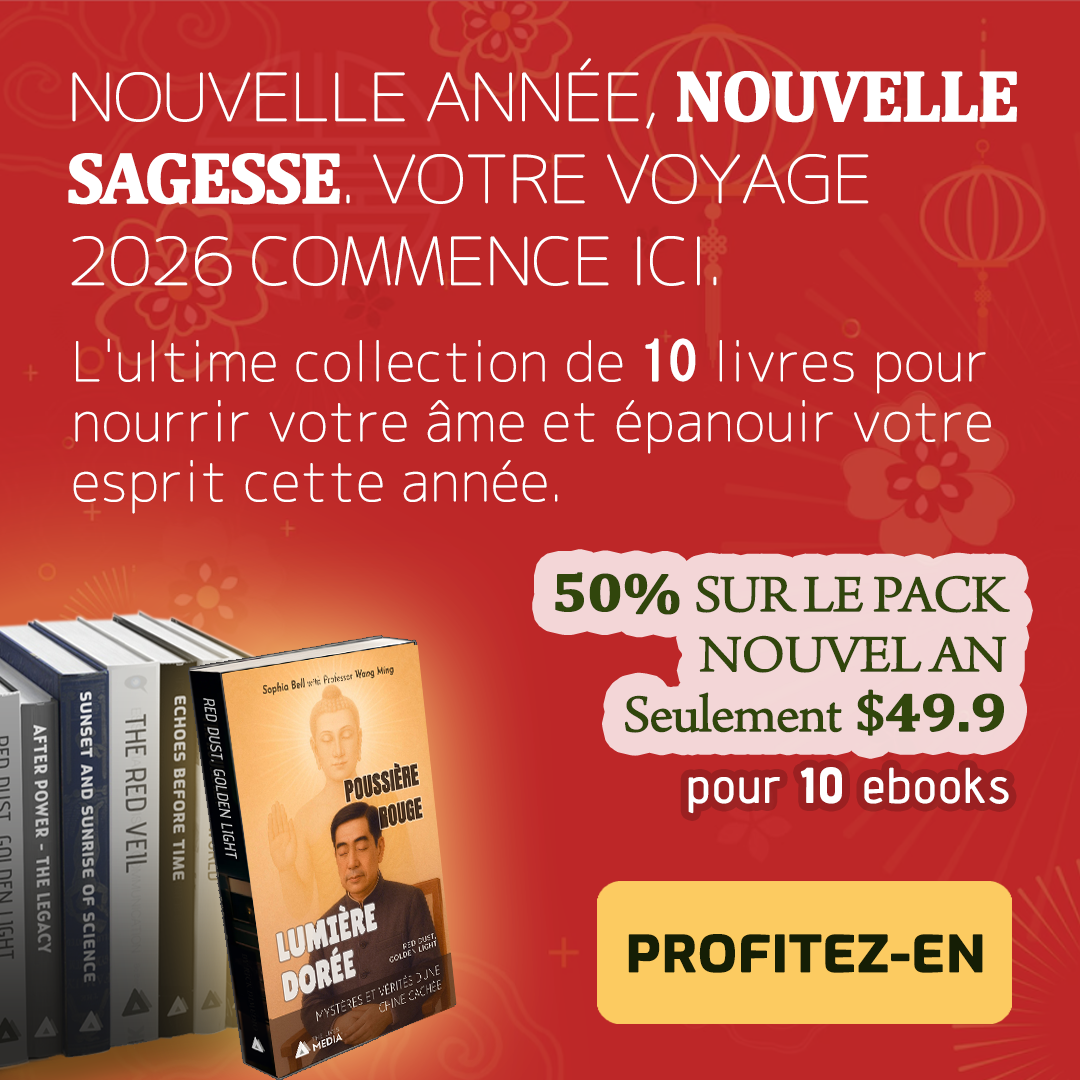
<style>
.page{position:relative;width:1080px;height:1080px;background:#bd2728}
.page>*{position:absolute;margin:0}
.t1{font:64.8px/82px "Chogokuboso-Gothic";letter-spacing:-0.05em;color:#ffffff;font-weight:bold;scale:1.11 1}
.t2{font:72px/82px "Cambria-Bold";letter-spacing:-0.05em;color:#ffffff;font-weight:bold}
.t3{font:54px/60px "Chogokuboso-Gothic";color:#ffffff;font-weight:bold}
.t4{font:54px/60px "MS-Gothic";color:#ffffff;font-weight:bold}
.t5{font:54px/60px "ArnoPro-LightDisplay";letter-spacing:-0.025em;color:#31460c;font-weight:bold;scale:1.11 1}
.t6{font:54px/60px "Cambria-Bold";letter-spacing:-0.025em;color:#31460c;font-weight:bold;scale:1.11 1}
.t7{font:54px/60px "Cambria";letter-spacing:-0.025em;color:#31460c;font-weight:bold;scale:1.11 1}
.t8{font:48px "AdventPro-Regular";letter-spacing:0.05em;color:#ffffff;font-weight:bold}
.t9{font:48px "AdventPro-Bold";letter-spacing:0.05em;color:#ffffff;font-weight:bold}
.t10{font:49.5px "Exo-Bold";letter-spacing:0.005em;color:#151e05;font-weight:bold;scale:1.11 1}
</style>
<div class="page">
<p class="t1" style="left:68px;top:58px;width:949px;height:228px">NOUVELLE ANNÉE, <span class="t2">NOUVELLE SAGESSE</span>. VOTRE VOYAGE 2026 COMMENCE ICI.</p>
<p class="t3" style="left:73px;top:338px;width:918px;height:176px">L'ultime collection de <span class="t4">10</span> livres pour nourrir votre âme et épanouir votre esprit cette année.</p>
<p class="t5" style="left:555px;top:572px;width:455px;height:164px;text-align:right"><span class="t6">50% </span>SUR LE PACK NOUVEL AN <br>Seulement<span class="t7"> $</span><span class="t6">49.9</span></p>
<p class="t8" style="left:688px;top:767px;width:321px;height:47px">pour <span class="t9">10</span> ebooks</p>
<p class="t10" style="left:628px;top:934px;width:355px;height:39px">PROFITEZ-EN</p>
</div>
